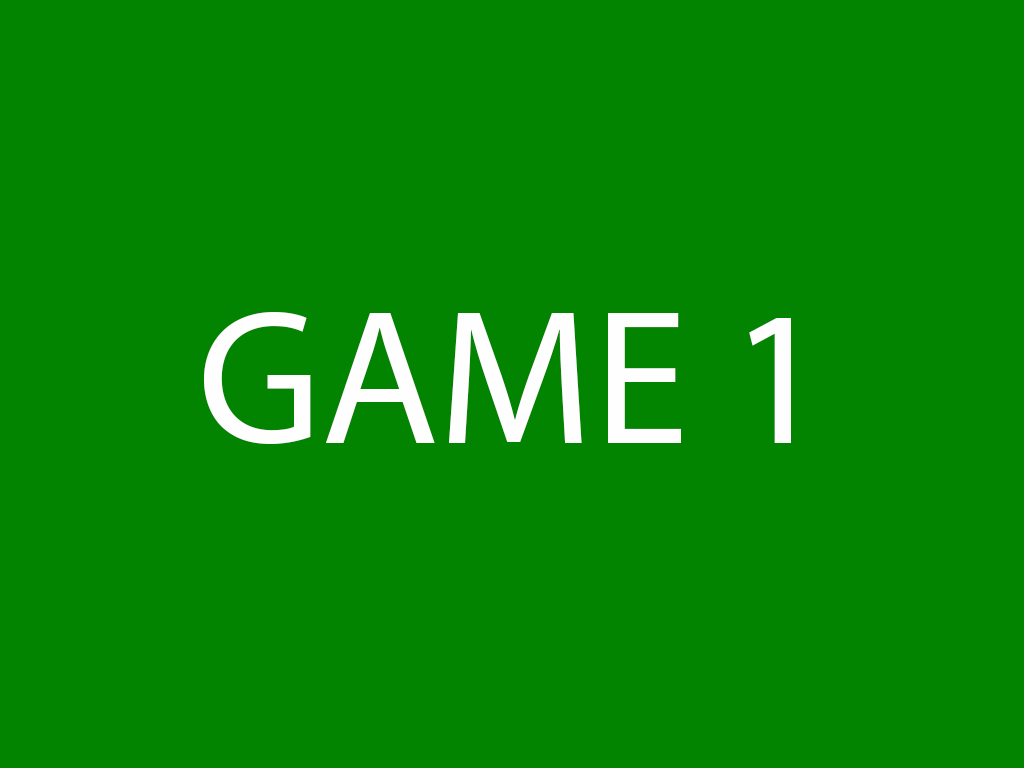
<style>
.page{position:relative;width:1024px;height:768px;background:#038400}
.page>*{position:absolute;margin:0}
.t1{font:192.6px "MyriadPro-Regular";color:#fefefe}
</style>
<div class="page">
<p class="t1" style="left:204px;top:312px;width:587px;height:132px">GAME 1</p>
</div>
